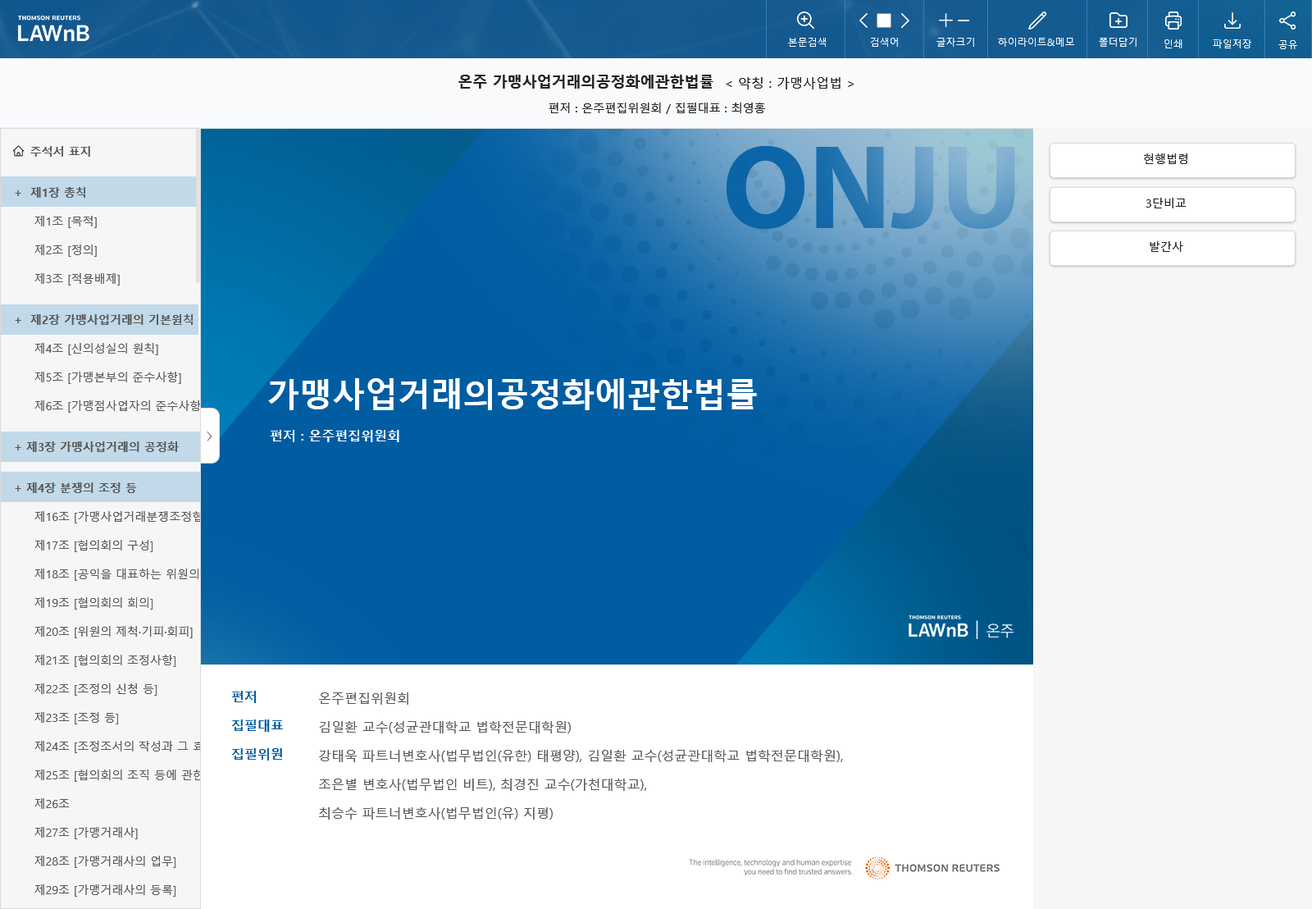
<style>
.page{position:relative;width:1312px;height:909px;background:#f6f6f6}
.page>*{position:absolute;margin:0}
.t1{font:11.5px/24.6px "MalgunGothic";color:#212121}
.t2{font:14.8px/24.6px "MalgunGothicBold";color:#212121}
.t3{font:13.1px/24.6px "MalgunGothic";color:#212121}
.t4{font:11.5px "MalgunGothic";color:#212121}
.t5{font:32.8px "MalgunGothicBold";color:#ffffff}
.t6{font:13.1px "MalgunGothicBold";color:#ffffff}
.t7{font:13.1px/28.7px "MalgunGothicBold";color:#005da2}
.t8{font:13.1px/28.7px "MalgunGothic";color:#585858}
</style>
<div class="page">
<p class="t1" style="left:458px;top:75px;width:397px;height:39px;text-align:center"><span class="t2">온주 가맹사업거래의공정화에관한법률  </span><span class="t3">&lt; 약칭 : 가맹사업법 &gt;<br></span>편저 : 온주편집위원회 / 집필대표 : 최영홍</p>
<p class="t4" style="left:1144px;top:153px;width:44px;height:11px">현행법령</p>
<p class="t4" style="left:1147px;top:198px;width:40px;height:10px">3단비교</p>
<p class="t4" style="left:1150px;top:241px;width:33px;height:11px">발간사</p>
<p class="t5" style="left:268px;top:378px;width:489px;height:32px">가맹사업거래의공정화에관한법률</p>
<p class="t6" style="left:271px;top:430px;width:128px;height:12px">편저 : 온주편집위원회</p>
<p class="t7" style="left:232px;top:691px;width:51px;height:69px">편저<br>집필대표<br>집필위원</p>
<p class="t8" style="left:319px;top:692px;width:524px;height:127px">온주편집위원회<br>김일환 교수(성균관대학교 법학전문대학원)<br>강태욱 파트너변호사(법무법인(유한) 태평양), 김일환 교수(성균관대학교 법학전문대학원), <br>조은별 변호사(법무법인 비트), 최경진 교수(가천대학교), <br>최승수 파트너변호사(법무법인(유) 지평)</p>
</div>
